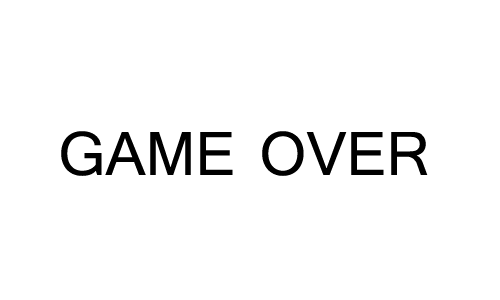
<style>
.page{position:relative;width:500px;height:300px;background:#ffffff}
.page>*{position:absolute;margin:0}
.t1{font:77px "Tunga";color:#000000}
</style>
<div class="page">
<p class="t1" style="left:61px;top:131px;width:367px;height:45px">GAME OVER</p>
</div>
